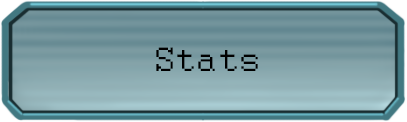
<style>
.page{position:relative;width:407px;height:122px}
.page>*{position:absolute;margin:0}
.t1{font:37.5px "Courier";color:#000000}
</style>
<div class="page">
<p class="t1" style="left:156px;top:47px;width:102px;height:24px">Stats</p>
</div>
